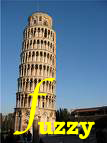
<style>
.page{position:relative;width:107px;height:143px}
.page>*{position:absolute;margin:0}
.t1{font:48px "LucidaCalligraphy-Italic";color:#ffff00}
.t2{font:24px "AmericanTypewriter-Bold";color:#ffff00}
</style>
<div class="page">
<p class="t1" style="left:13px;top:78px;width:43px;height:57px">f</p>
<p class="t2" style="left:38px;top:121px;width:57px;height:18px">uzzy</p>
</div>
